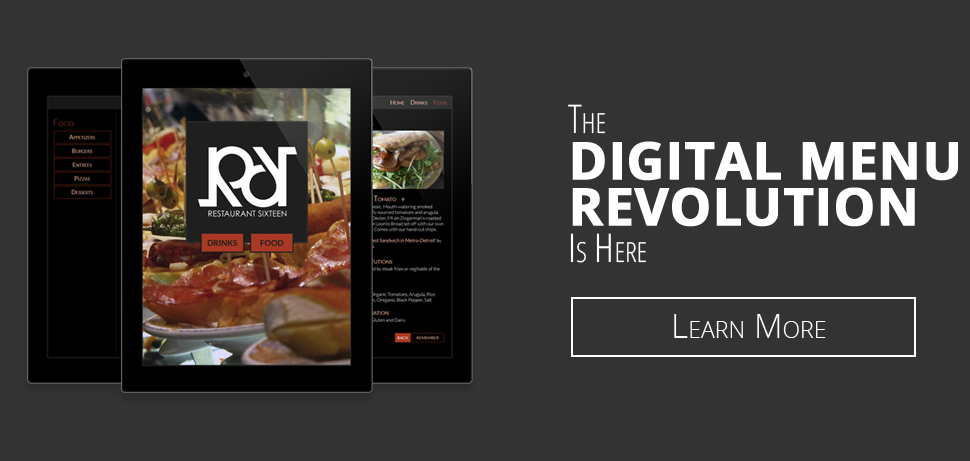
<style>
.page{position:relative;width:970px;height:461px;background:#333333}
.page>*{position:absolute;margin:0}
.t1{font:51.7px/46px "OpenSans-Bold";color:#ffffff;text-transform:uppercase;font-weight:bold}
.t2{font:39.5px/46px "OpenSans-CondensedLight";color:#ffffff;font-variant:small-caps}
.t3{font:39.5px/37.4px "OpenSans-CondensedLight";color:#ffffff;font-variant:small-caps}
.t4{font:33.1px "OpenSans-Light";color:#ffffff;font-variant:small-caps}
</style>
<div class="page">
<p class="t1" style="left:568px;top:104px;width:390px;height:159px"><span class="t2">The<br></span>Digital Menu<br>Revolution<br><span class="t3">Is Here</span></p>
<p class="t4" style="left:674px;top:314px;width:152px;height:24px">Learn More</p>
</div>
